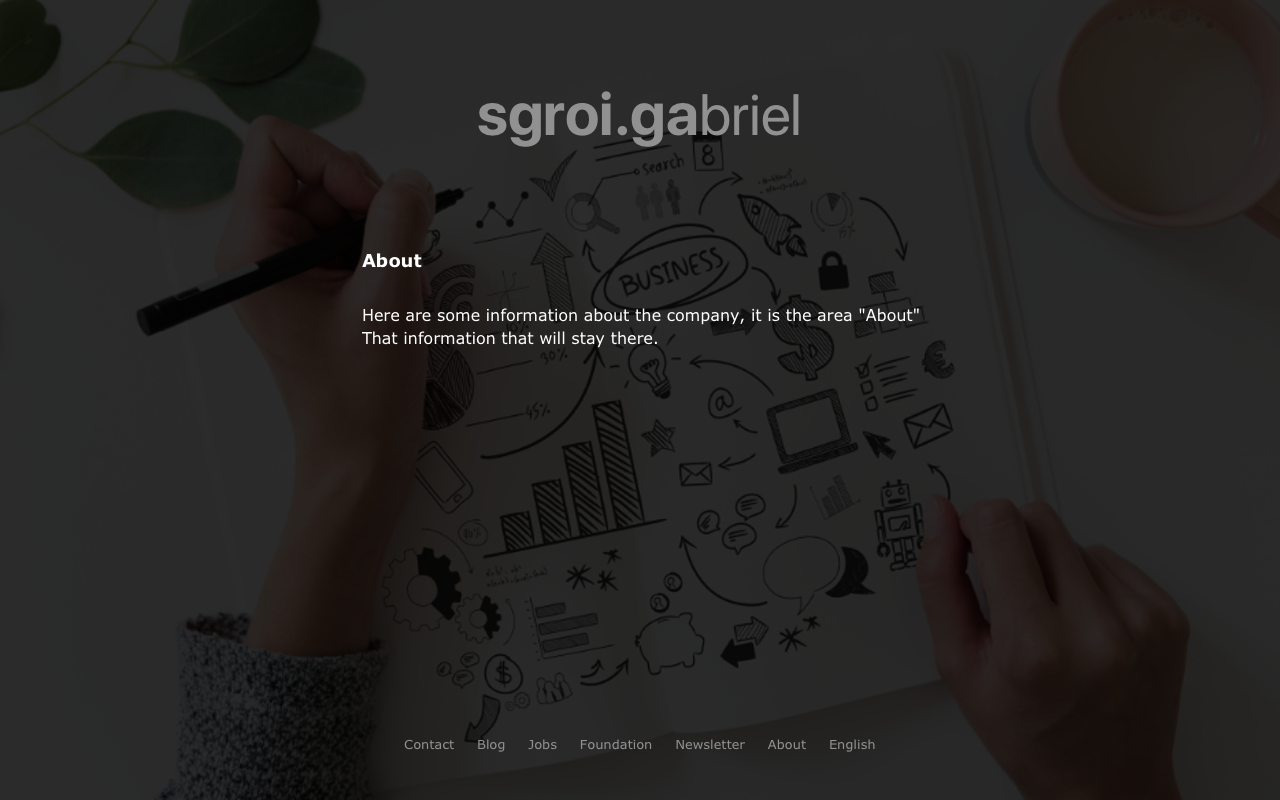
<style>
.page{position:relative;width:1280px;height:800px}
.page>*{position:absolute;margin:0}
.t1{font:60px "SFProDisplay-Bold";color:#919191}
.t2{font:58px "SFProDisplay-Regular";color:#919191}
.t3{font:16px/28.2px "Verdana";color:#ffffff}
.t4{font:18px/33.1px "Verdana-Bold";color:#ffffff}
.t5{font:13px "Verdana";color:#919191}
</style>
<div class="page">
<p class="t1" style="left:478px;top:91px;width:321px;height:56px">sgroi.ga<span class="t2">briel</span></p>
<p class="t3" style="left:362px;top:253px;width:557px;height:95px"><span class="t4">About<br></span><br>Here are some information about the company, it is the area ”About”<br>That information that will stay there.</p>
<p class="t5" style="left:404px;top:739px;width:471px;height:13px">Contact     Blog     Jobs     Foundation     Newsletter     About     English</p>
</div>
